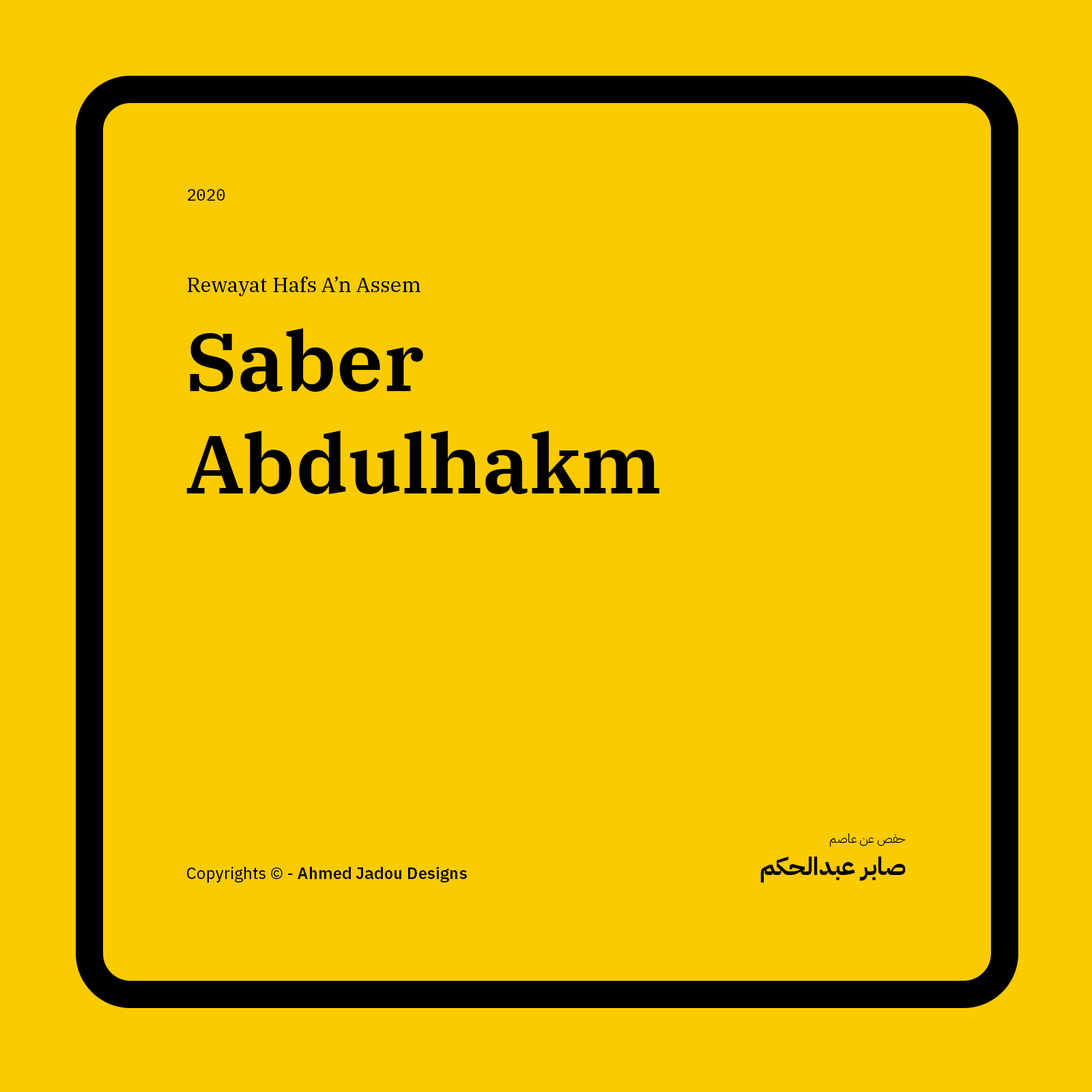
<style>
.page{position:relative;width:1092px;height:1092px;background:#facb00}
.page>*{position:absolute;margin:0}
.t1{font:16.4px "IBMPlexMono-Text";color:#000000}
.t2{font:20.5px "IBMPlexSerif-Text";color:#000000}
.t3{font:81.9px/102.7px "IBMPlexSerif-SemiBold";color:#000000}
.t4{font:12.3px "IBMPlexArabic-Light";color:#000000}
.t5{font:24.6px "IBMPlexArabic-Bold";color:#000000}
.t6{font:16.4px "IBMPlexSans-SemiBold";color:#000000}
.t7{font:16.4px "IBMPlexSans-Text";color:#000000}
</style>
<div class="page">
<p class="t1" style="left:188px;top:189px;width:37px;height:12px">2020</p>
<p class="t2" style="left:187px;top:276px;width:233px;height:20px">Rewayat Hafs A’n Assem</p>
<p class="t3" style="left:186px;top:328px;width:473px;height:166px">Saber Abdulhakm</p>
<p class="t4" style="left:830px;top:833px;width:76px;height:14px">حفص عن عاصم</p>
<p class="t5" style="left:760px;top:857px;width:146px;height:25px">صابر عبدالحكم</p>
<p class="t6" style="left:187px;top:867px;width:280px;height:15px"><span class="t7">Copyrights © - </span>Ahmed Jadou Designs</p>
</div>
